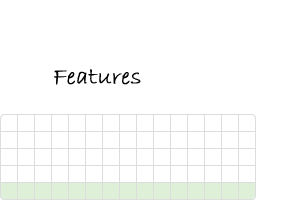
<style>
.page{position:relative;width:300px;height:200px;background:#ffffff}
.page>*{position:absolute;margin:0}
.t1{font:24px "BradleyHandITC";color:#000000;font-weight:bold}
</style>
<div class="page">
<p class="t1" style="left:54px;top:69px;width:87px;height:16px">Features</p>
</div>
